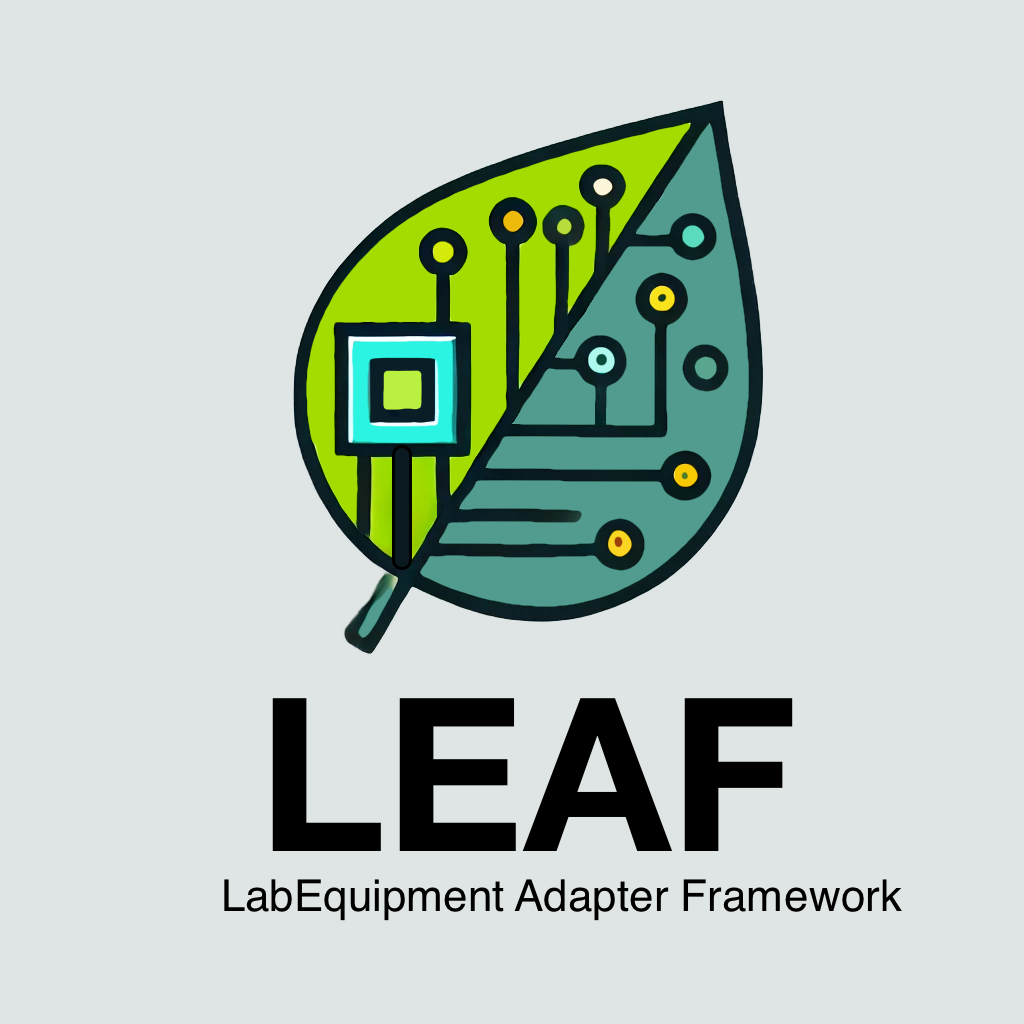
<style>
.page{position:relative;width:1024px;height:1024px;background:#dfe4e4}
.page>*{position:absolute;margin:0}
.t1{font:214px "HelveticaNeue";color:#000000}
.t2{font:44px "Helvetica";color:#000000}
.t3{font:44px "Helvetica";letter-spacing:0.03em;color:#000000}
</style>
<div class="page">
<p class="t1" style="left:272px;top:698px;width:521px;height:153px">LEAF</p>
<p class="t2" style="left:224px;top:879px;width:678px;height:42px">LabEquipment Adapter Fra<span class="t3">m</span>ework</p>
</div>
